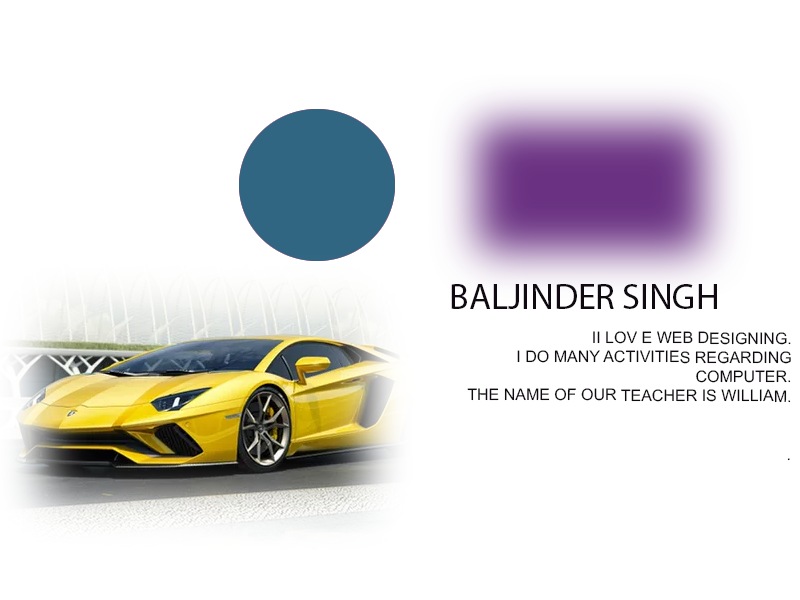
<style>
.page{position:relative;width:800px;height:600px;background:#ffffff}
.page>*{position:absolute;margin:0}
.t1{font:36px "MyriadPro-Regular";color:#100911}
.t2{font:16px "ArialMT";color:#100911}
</style>
<div class="page">
<p class="t1" style="left:451px;top:284px;width:266px;height:25px">BALJINDER SINGH</p>
<p class="t2" style="left:467px;top:331px;width:324px;height:130px;text-align:right">II LOV E WEB DESIGNING.<br>I DO MANY ACTIVITIES REGARDING COMPUTER.<br>THE NAME OF OUR TEACHER IS WILLIAM.<br><br>.</p>
</div>
